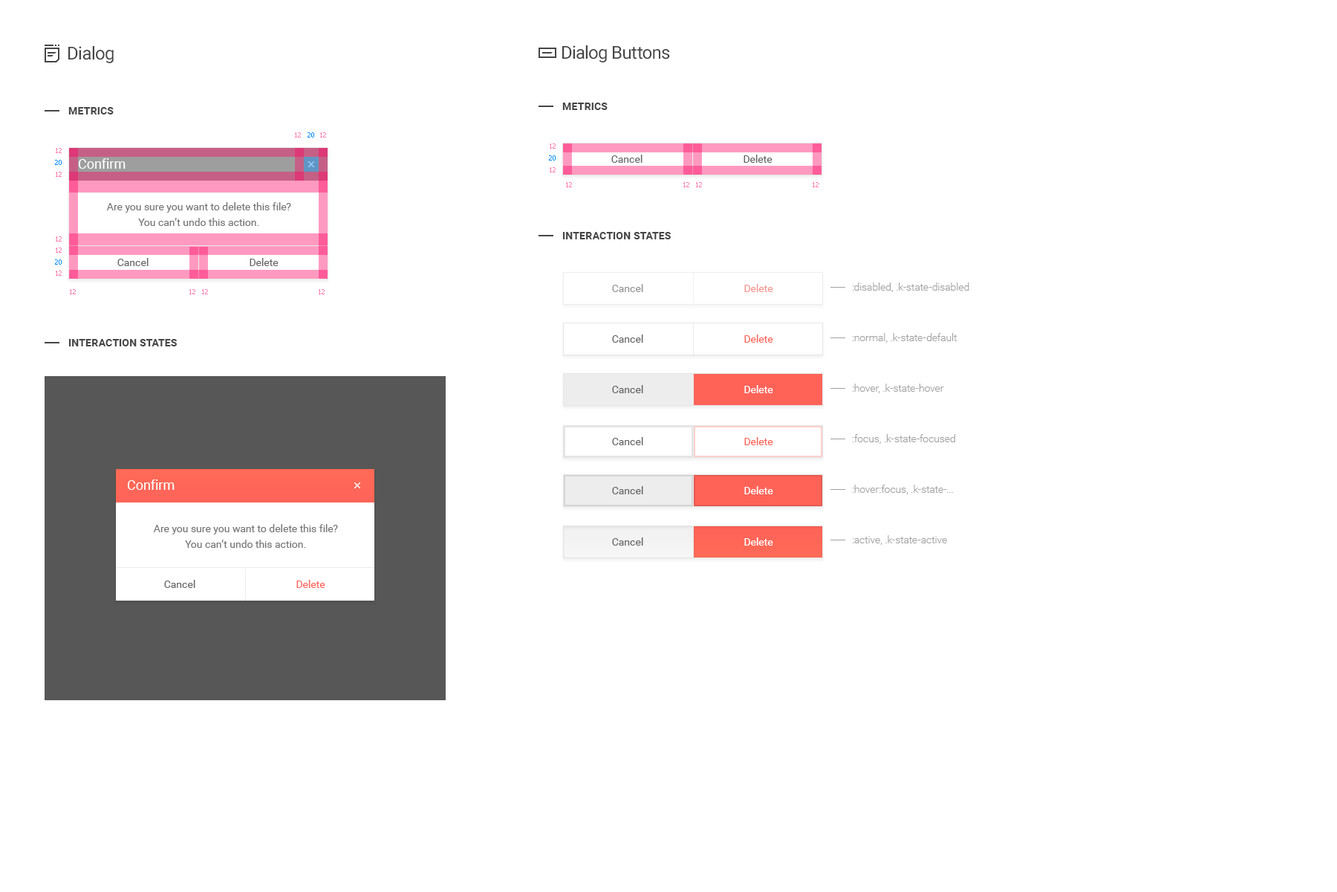
<style>
.page{position:relative;width:1337px;height:892px;background:#ffffff}
.page>*{position:absolute;margin:0}
.t1{font:17.8px "Roboto-Regular";letter-spacing:-0.025em;color:#454545}
.t2{font:10.4px "Roboto-Bold";letter-spacing:0.01em;color:#454545;text-transform:uppercase}
.t3{font:6.7px "Tahoma";color:#ff7cae}
.t4{font:6.7px "Tahoma";color:#008aff}
.t5{font:13.4px "Roboto-Regular";color:#ffffff}
.t6{font:10.4px "Roboto-Regular";color:#656565}
.t7{font:10.4px/15.6px "Roboto-Regular";color:#757575}
.t8{font:10.4px "Roboto-Regular";color:#939393}
.t9{font:10.4px "Roboto-Regular";color:#f7958e}
.t10{font:10.4px/50.5px "Roboto-Light";color:#a1a1a1}
.t11{font:10.4px "Roboto-Regular";color:#ff6358}
.t12{font:10.4px "Roboto-Regular";color:#ffffff}
</style>
<div class="page">
<p class="t1" style="left:68px;top:46px;width:46px;height:17px">Dialog</p>
<p class="t1" style="left:562px;top:45px;width:108px;height:17px">Dialog Buttons</p>
<p class="t2" style="left:68px;top:107px;width:46px;height:7px">Metrics</p>
<p class="t2" style="left:562px;top:103px;width:46px;height:7px">Metrics</p>
<p class="t3" style="left:295px;top:132px;width:6px;height:5px">12</p>
<p class="t4" style="left:308px;top:132px;width:6px;height:5px">20</p>
<p class="t3" style="left:320px;top:132px;width:6px;height:5px">12</p>
<p class="t3" style="left:56px;top:148px;width:6px;height:5px">12</p>
<p class="t3" style="left:550px;top:143px;width:6px;height:6px">12</p>
<p class="t4" style="left:55px;top:160px;width:7px;height:5px">20</p>
<p class="t5" style="left:78px;top:158px;width:48px;height:11px">Confirm</p>
<p class="t4" style="left:549px;top:155px;width:7px;height:5px">20</p>
<p class="t6" style="left:611px;top:155px;width:32px;height:8px">Cancel</p>
<p class="t6" style="left:744px;top:155px;width:29px;height:8px">Delete</p>
<p class="t3" style="left:56px;top:172px;width:6px;height:5px">12</p>
<p class="t3" style="left:550px;top:167px;width:6px;height:5px">12</p>
<p class="t3" style="left:566px;top:182px;width:6px;height:5px">12</p>
<p class="t3" style="left:684px;top:182px;width:6px;height:5px">12</p>
<p class="t3" style="left:696px;top:182px;width:6px;height:5px">12</p>
<p class="t3" style="left:813px;top:182px;width:6px;height:5px">12</p>
<p class="t7" style="left:106px;top:202px;width:185px;height:24px;text-align:center">Are you sure you want to delete this file?<br>You can’t undo this action.</p>
<p class="t2" style="left:562px;top:232px;width:109px;height:7px">Interaction states</p>
<p class="t3" style="left:56px;top:236px;width:6px;height:5px">12</p>
<p class="t3" style="left:56px;top:247px;width:6px;height:6px">12</p>
<p class="t6" style="left:117px;top:258px;width:32px;height:8px">Cancel</p>
<p class="t6" style="left:250px;top:258px;width:29px;height:8px">Delete</p>
<p class="t4" style="left:55px;top:259px;width:7px;height:6px">20</p>
<p class="t3" style="left:56px;top:270px;width:6px;height:6px">12</p>
<p class="t3" style="left:70px;top:289px;width:6px;height:5px">12</p>
<p class="t3" style="left:189px;top:289px;width:6px;height:5px">12</p>
<p class="t3" style="left:202px;top:289px;width:6px;height:5px">12</p>
<p class="t3" style="left:319px;top:289px;width:6px;height:5px">12</p>
<p class="t8" style="left:612px;top:284px;width:31px;height:8px">Cancel</p>
<p class="t9" style="left:744px;top:284px;width:29px;height:8px">Delete</p>
<p class="t10" style="left:852px;top:282px;width:118px;height:263px">:disabled, .k-state-disabled<br>:normal, .k-state-default<br>:hover, .k-state-hover<br>:focus, .k-state-focused<br>:hover:focus, .k-state-...<br>:active, .k-state-active</p>
<p class="t2" style="left:68px;top:339px;width:109px;height:7px">Interaction states</p>
<p class="t6" style="left:612px;top:334px;width:31px;height:9px">Cancel</p>
<p class="t11" style="left:744px;top:334px;width:29px;height:9px">Delete</p>
<p class="t6" style="left:612px;top:385px;width:31px;height:8px">Cancel</p>
<p class="t12" style="left:744px;top:385px;width:29px;height:8px">Delete</p>
<p class="t6" style="left:612px;top:437px;width:31px;height:8px">Cancel</p>
<p class="t11" style="left:744px;top:437px;width:29px;height:8px">Delete</p>
<p class="t5" style="left:127px;top:479px;width:48px;height:11px">Confirm</p>
<p class="t6" style="left:612px;top:486px;width:31px;height:8px">Cancel</p>
<p class="t12" style="left:744px;top:486px;width:29px;height:8px">Delete</p>
<p class="t7" style="left:153px;top:524px;width:185px;height:24px;text-align:center">Are you sure you want to delete this file?<br>You can’t undo this action.</p>
<p class="t6" style="left:612px;top:537px;width:31px;height:8px">Cancel</p>
<p class="t12" style="left:744px;top:537px;width:29px;height:8px">Delete</p>
<p class="t6" style="left:164px;top:580px;width:31px;height:8px">Cancel</p>
<p class="t11" style="left:296px;top:580px;width:29px;height:8px">Delete</p>
</div>
